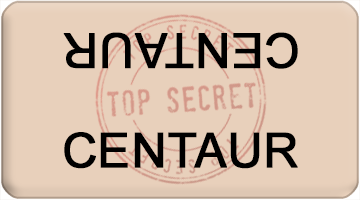
<style>
.page{position:relative;width:360px;height:200px;background:#e8d0bb}
.page>*{position:absolute;margin:0}
.t1{font:48px "ArialMT";color:#000000;font-weight:bold}
</style>
<div class="page">
<p class="t1" style="left:63px;top:32px;width:235px;height:37px;rotate:180deg">CENTAUR</p>
<p class="t1" style="left:64px;top:132px;width:234px;height:37px">CENTAUR</p>
</div>
